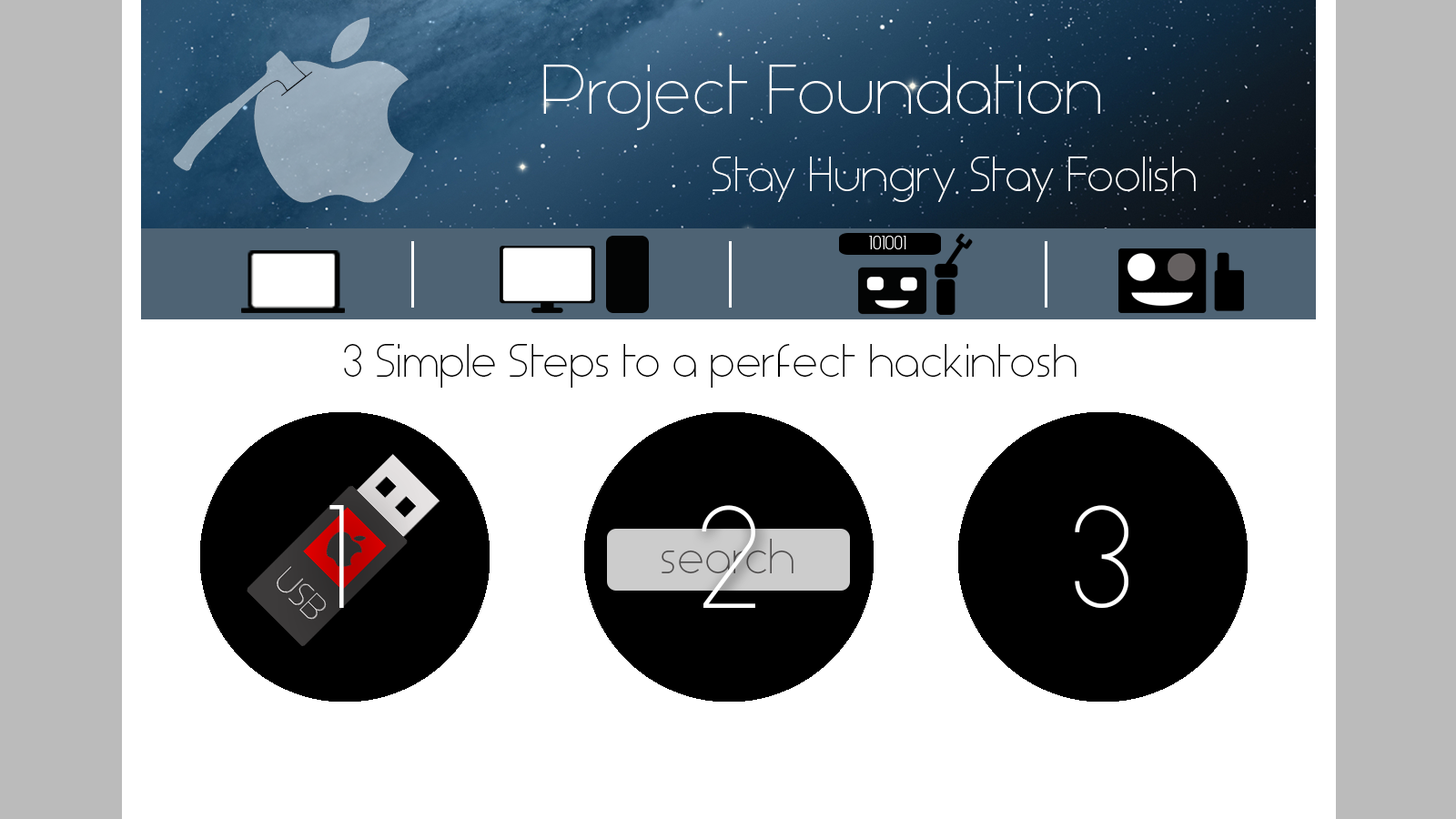
<style>
.page{position:relative;width:1456px;height:819px;background:#ffffff}
.page>*{position:absolute;margin:0}
.t1{font:65.5px "Aspergit";color:#ffffff}
.t2{font:45.5px "Aspergit";color:#ffffff}
.t3{font:43.7px "Aspergit";color:#000000}
.t4{font:136.5px "Aspergit";color:#ffffff}
</style>
<div class="page">
<p class="t1" style="left:543px;top:65px;width:557px;height:65px">Project Foundation</p>
<p class="t2" style="left:713px;top:157px;width:483px;height:45px">Stay Hungry Stay Foolish</p>
<p class="t3" style="left:344px;top:344px;width:733px;height:44px">3 Simple Steps to a perfect hackintosh</p>
<p class="t4" style="left:329px;top:505px;width:15px;height:103px">1</p>
<p class="t4" style="left:702px;top:505px;width:53px;height:103px">2</p>
<p class="t4" style="left:1075px;top:505px;width:53px;height:103px">3</p>
</div>
